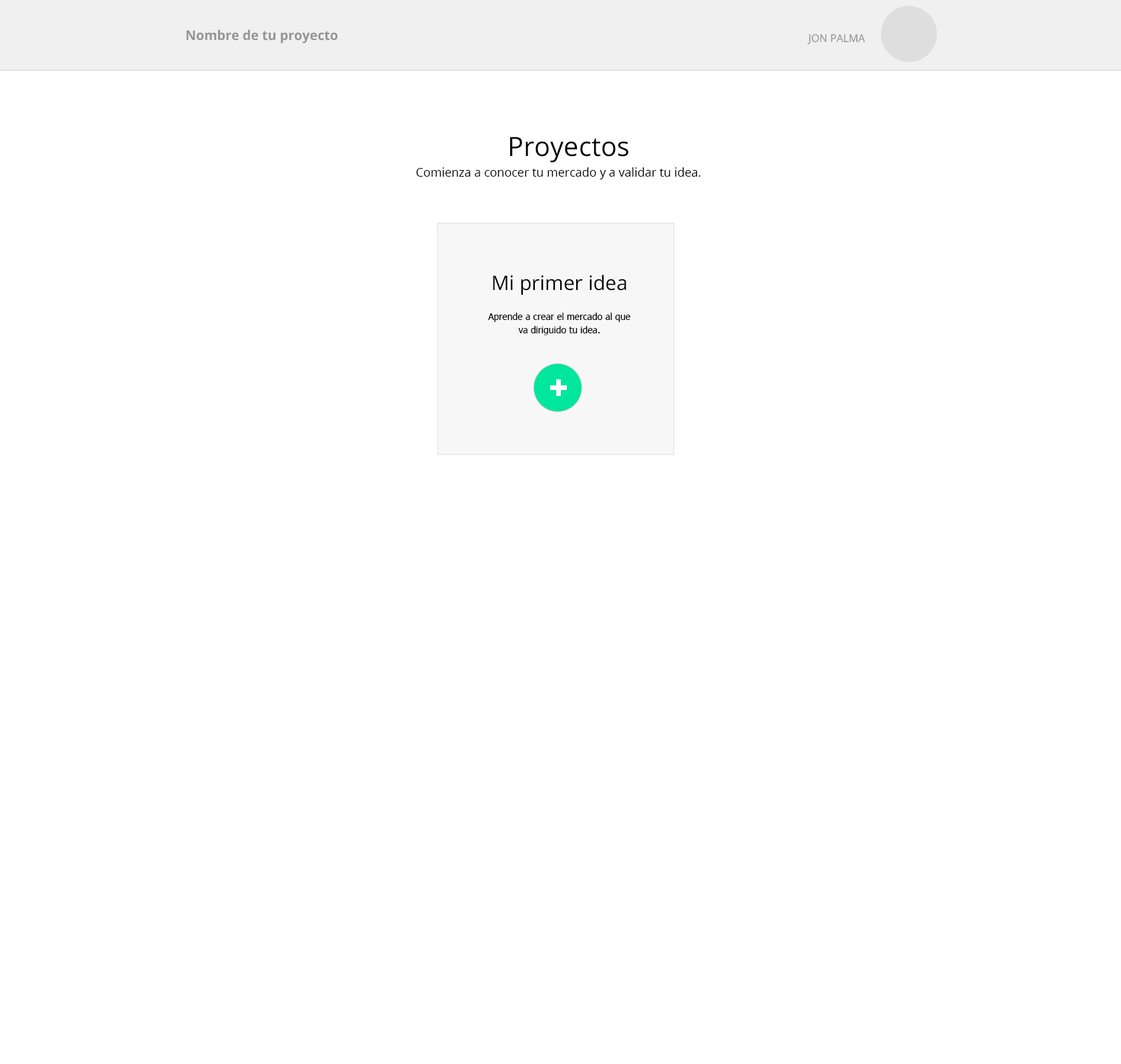
<style>
.page{position:relative;width:1121px;height:1064px;background:#ffffff}
.page>*{position:absolute;margin:0}
.t1{font:13.3px "OpenSans-Bold";color:#959595}
.t2{font:10.7px "OpenSans";color:#959595}
.t3{font:26.7px "OpenSans";color:#000000}
.t4{font:12px "OpenSans";color:#000000}
.t5{font:20px "OpenSans";color:#000000}
.t6{font:9.3px/13.3px "Tahoma";color:#000000}
</style>
<div class="page">
<p class="t1" style="left:186px;top:29px;width:151px;height:14px">Nombre de tu proyecto</p>
<p class="t2" style="left:807px;top:34px;width:58px;height:11px">JON PALMA</p>
<p class="t3" style="left:510px;top:137px;width:119px;height:26px">Proyectos</p>
<p class="t4" style="left:416px;top:167px;width:285px;height:12px">Comienza a conocer tu mercado y a validar tu idea.</p>
<p class="t5" style="left:493px;top:275px;width:133px;height:20px">Mi primer idea</p>
<p class="t6" style="left:488px;top:313px;width:143px;height:22px;text-align:center">Aprende a crear el mercado al que va diriguido tu idea.</p>
</div>
